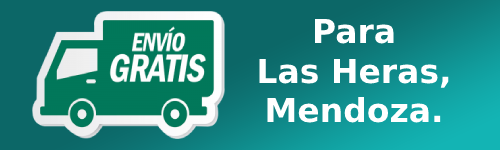
<style>
.page{position:relative;width:500px;height:150px}
.page>*{position:absolute;margin:0}
.t1{font:33px "DejaVuSans-Bold";color:#ffffff}
</style>
<div class="page">
<p class="t1" style="left:259px;top:18px;width:190px;height:105px;text-align:center">Para <br>Las Heras, Mendoza.</p>
</div>
